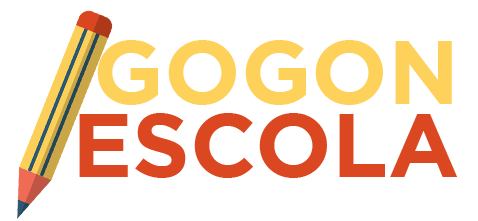
<style>
.page{position:relative;width:478px;height:221px;background:#ffffff}
.page>*{position:absolute;margin:0}
.t1{font:90.3px "HomepageBaukasten-Bold";color:#fdd15a}
.t2{font:90.3px "HomepageBaukasten-Bold";color:#da4720}
</style>
<div class="page">
<p class="t1" style="left:97px;top:40px;width:355px;height:65px">GOGON</p>
<p class="t2" style="left:79px;top:113px;width:379px;height:65px">ESCOLA</p>
</div>
